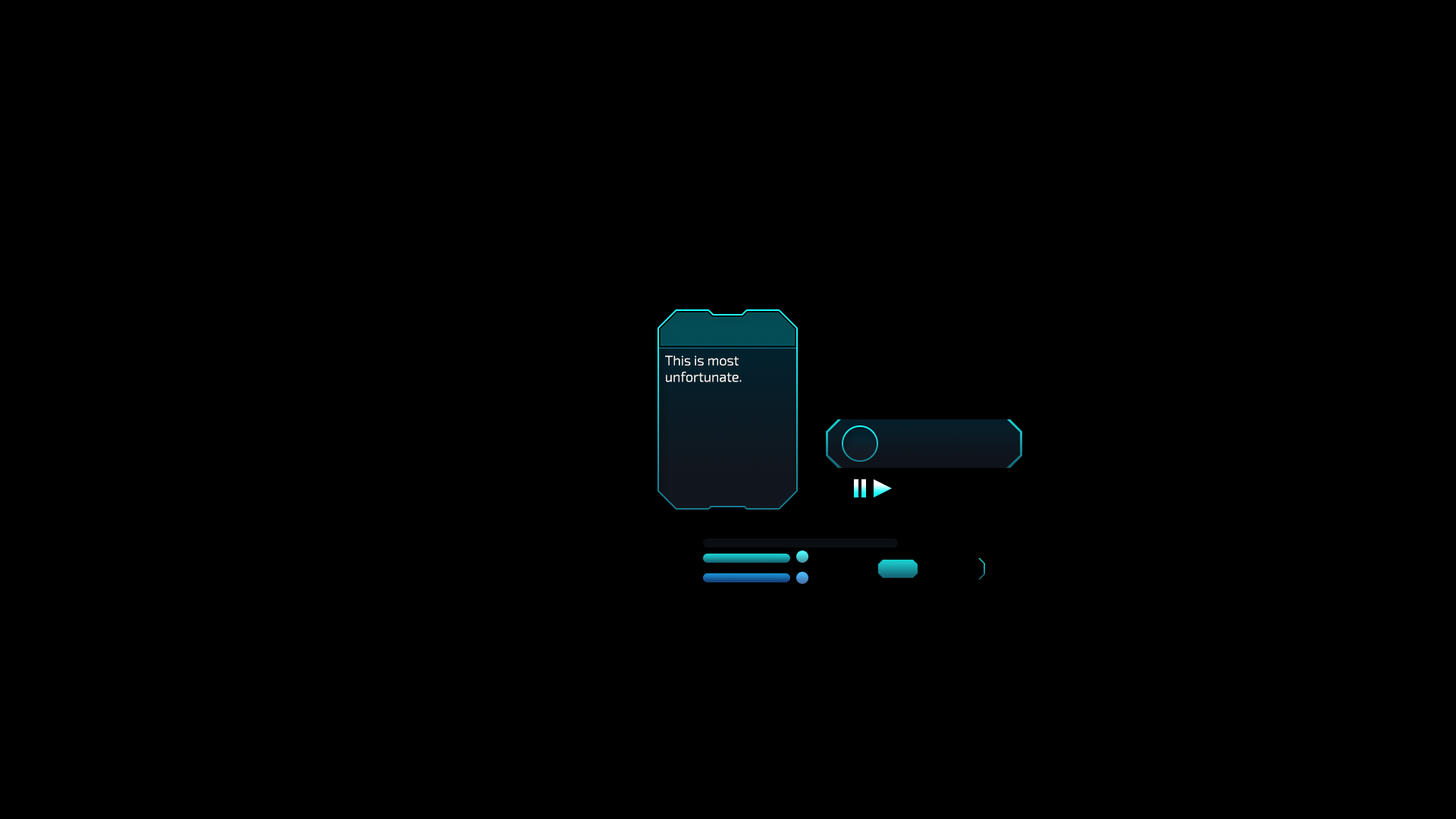
<style>
.page{position:relative;width:1456px;height:819px;background:#000000}
.page>*{position:absolute;margin:0}
.t1{font:13.6px "Exo2-Light";color:#fffcf7}
</style>
<div class="page">
<p class="t1" style="left:665px;top:356px;width:77px;height:26px;text-align:center">This is most <br>unfortunate.</p>
</div>
